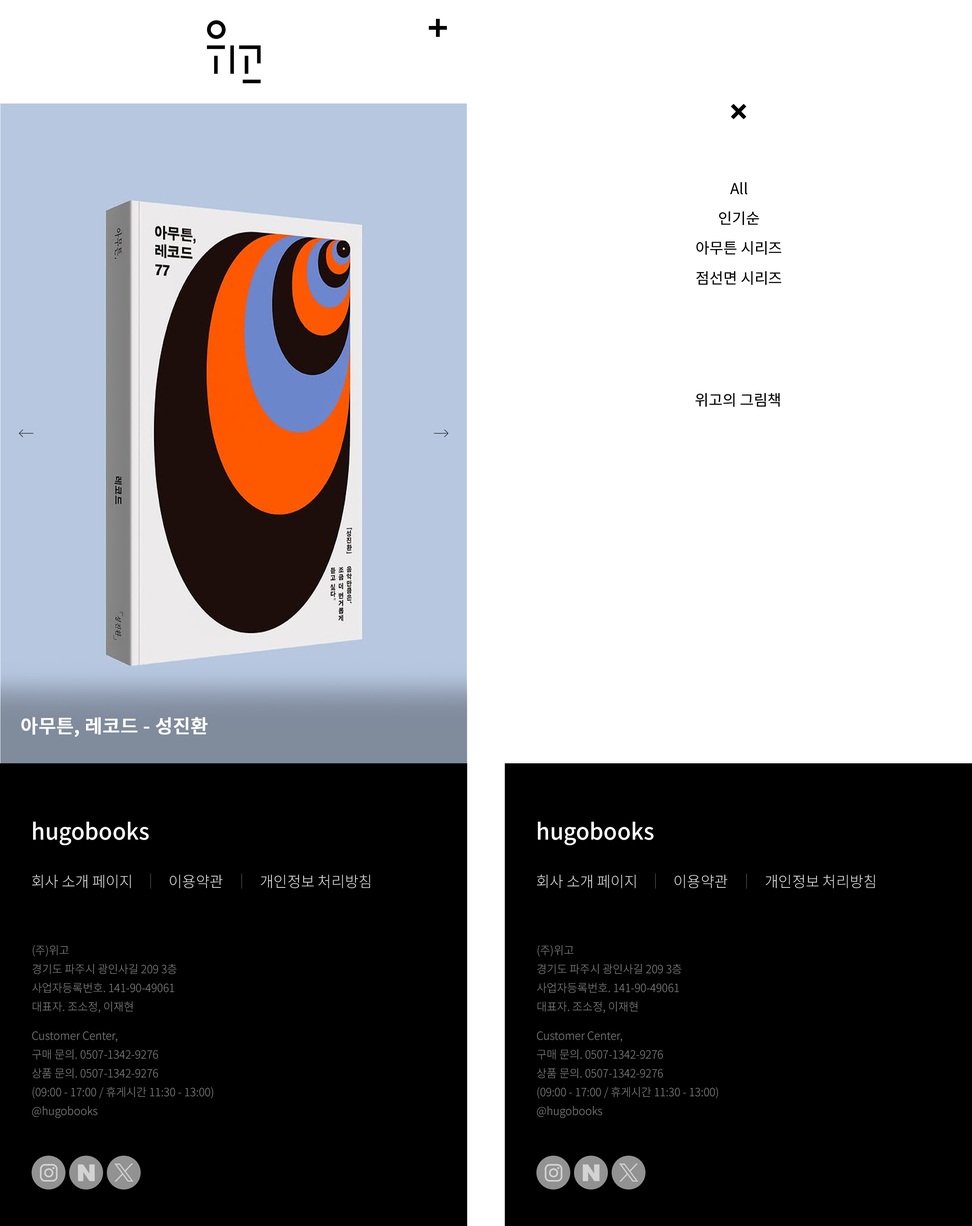
<style>
.page{position:relative;width:972px;height:1226px;background:#ffffff}
.page>*{position:absolute;margin:0}
.t1{font:15.1px "NotoSansKR-Regular";color:#000000;font-weight:bold}
.t2{font:18.8px "NotoSansKR-Medium";color:#ffffff;font-weight:bold}
.t3{font:22.6px "NotoSansKR-Medium";color:#ffffff;font-weight:bold}
.t4{font:15.1px "NotoSansKR-Light";color:#e4e4e4;text-transform:uppercase;font-weight:bold}
.t5{font:11.3px/18.8px "NotoSansKR-Light";color:#808080;font-weight:bold}
</style>
<div class="page">
<p class="t1" style="left:730px;top:182px;width:18px;height:13px">All</p>
<p class="t1" style="left:719px;top:211px;width:40px;height:14px">인기순</p>
<p class="t1" style="left:697px;top:241px;width:85px;height:14px">아무튼 시리즈</p>
<p class="t1" style="left:697px;top:271px;width:85px;height:14px">점선면 시리즈</p>
<p class="t1" style="left:696px;top:393px;width:84px;height:14px">위고의 그림책</p>
<p class="t2" style="left:21px;top:717px;width:187px;height:20px">아무튼, 레코드 - 성진환</p>
<p class="t3" style="left:33px;top:822px;width:116px;height:24px">hugobooks</p>
<p class="t3" style="left:538px;top:822px;width:116px;height:24px">hugobooks</p>
<p class="t4" style="left:32px;top:875px;width:99px;height:14px">회사 소개 페이지</p>
<p class="t4" style="left:170px;top:875px;width:53px;height:14px">이용약관</p>
<p class="t4" style="left:261px;top:875px;width:109px;height:14px">개인정보 처리방침</p>
<p class="t4" style="left:537px;top:875px;width:99px;height:14px">회사 소개 페이지</p>
<p class="t4" style="left:675px;top:875px;width:53px;height:14px">이용약관</p>
<p class="t4" style="left:766px;top:875px;width:109px;height:14px">개인정보 처리방침</p>
<p class="t5" style="left:32px;top:945px;width:145px;height:68px">(주)위고<br>경기도 파주시 광인사길 209 3층<br>사업자등록번호. 141-90-49061<br>대표자. 조소정, 이재현</p>
<p class="t5" style="left:537px;top:945px;width:145px;height:68px">(주)위고<br>경기도 파주시 광인사길 209 3층<br>사업자등록번호. 141-90-49061<br>대표자. 조소정, 이재현</p>
<p class="t5" style="left:32px;top:1031px;width:181px;height:87px">Customer Center,<br>구매 문의. 0507-1342-9276<br>상품 문의. 0507-1342-9276<br>(09:00 - 17:00 / 휴게시간 11:30 - 13:00)<br>@hugobooks</p>
<p class="t5" style="left:537px;top:1031px;width:181px;height:87px">Customer Center,<br>구매 문의. 0507-1342-9276<br>상품 문의. 0507-1342-9276<br>(09:00 - 17:00 / 휴게시간 11:30 - 13:00)<br>@hugobooks</p>
</div>
